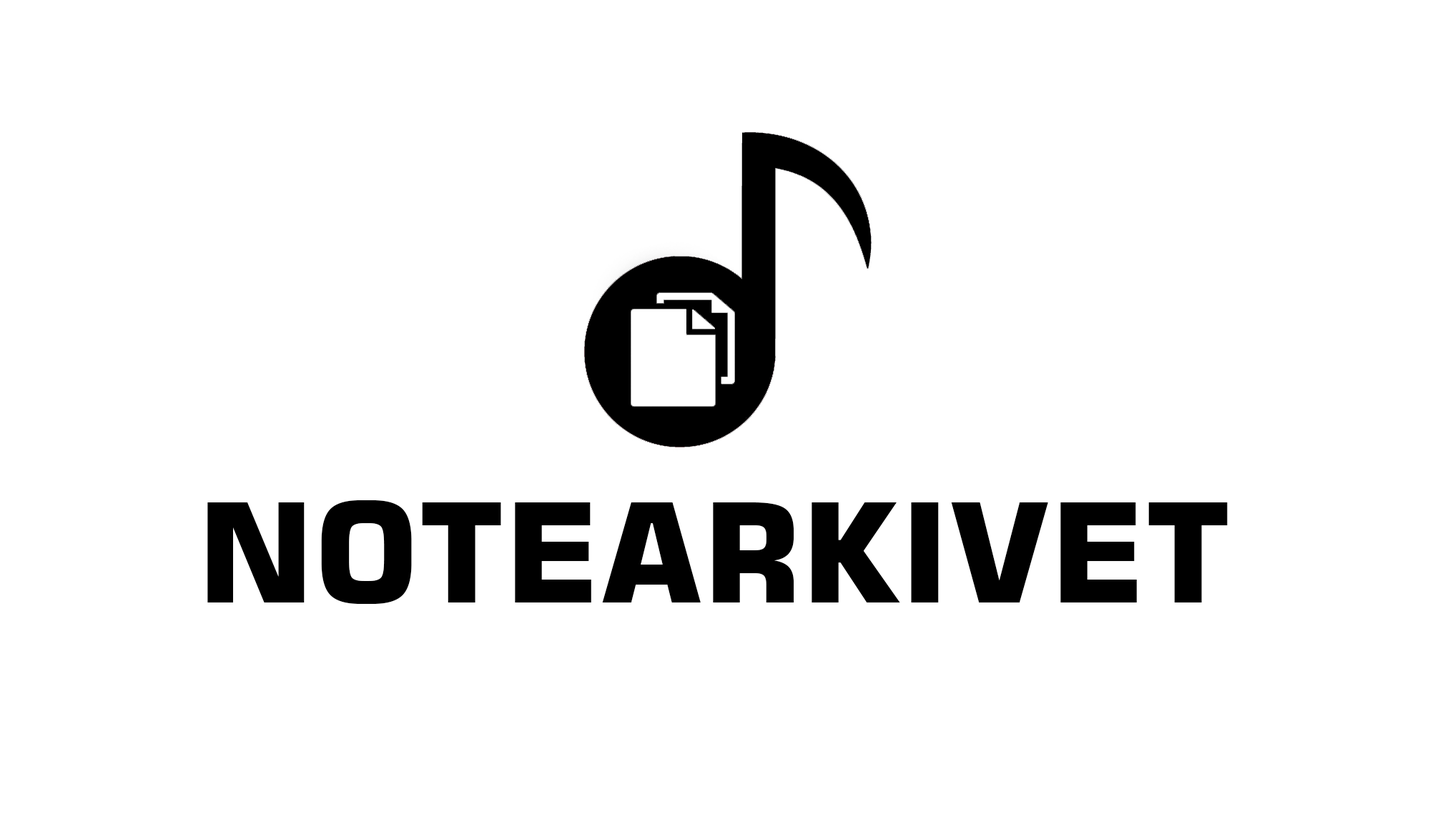
<style>
.page{position:relative;width:1430px;height:834px;background:#ffffff}
.page>*{position:absolute;margin:0}
.t1{font:137.5px "Square721BT-Bold";color:#000000}
</style>
<div class="page">
<p class="t1" style="left:207px;top:500px;width:1020px;height:104px">NOTEARKIVET</p>
</div>
